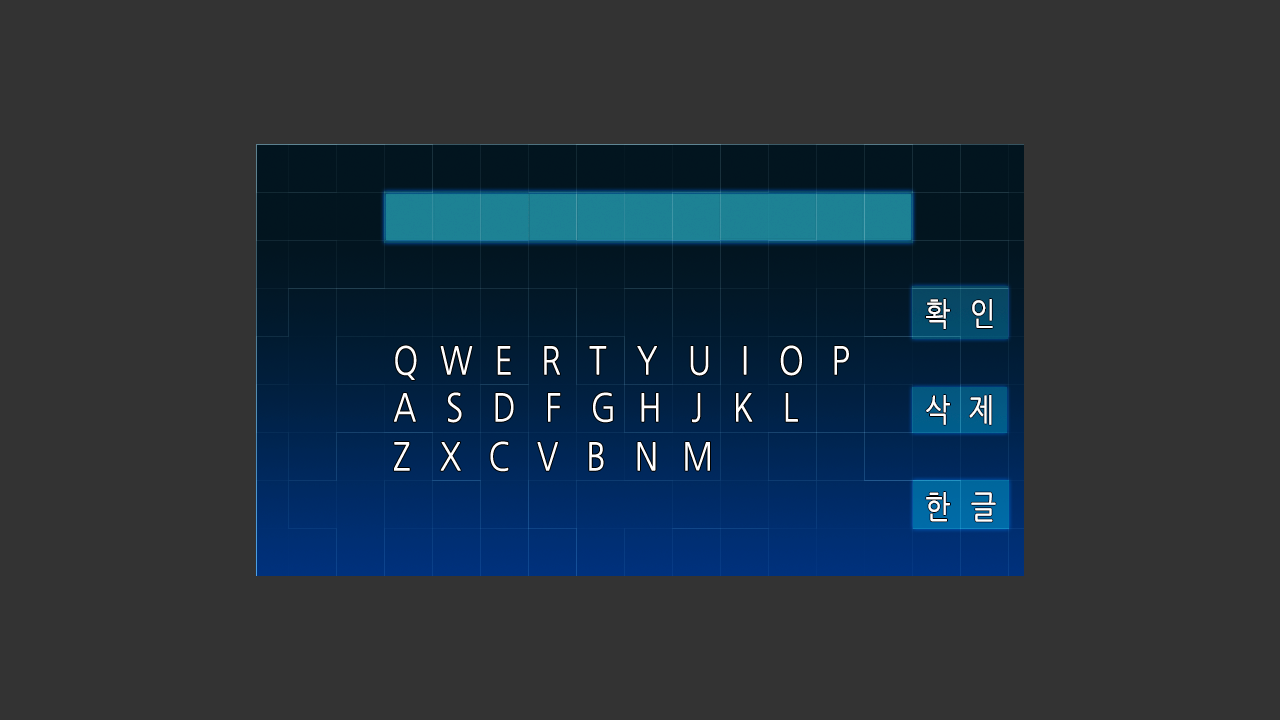
<style>
.page{position:relative;width:1280px;height:720px;background:#333333}
.page>*{position:absolute;margin:0}
.t1{font:32px "NanumGothic";letter-spacing:0.715em;color:#fffefe;font-weight:bold;scale:0.83 1}
.t2{font:38.4px "NanumGothic";letter-spacing:0.91em;color:#fffefe;font-weight:bold;scale:0.83 1}
.t3{font:38.4px "NanumGothic";letter-spacing:0.65em;color:#fffefe;font-weight:bold;scale:0.83 1}
.t4{font:38.4px "NanumGothic";letter-spacing:0.85em;color:#fffefe;font-weight:bold;scale:0.83 1}
.t5{font:38.4px "NanumGothic";letter-spacing:0.83em;color:#fffefe;font-weight:bold;scale:0.83 1}
.t6{font:38.4px "NanumGothic";letter-spacing:0.89em;color:#fffefe;font-weight:bold;scale:0.83 1}
.t7{font:38.4px "NanumGothic";letter-spacing:0.67em;color:#fffefe;font-weight:bold;scale:0.83 1}
.t8{font:38.4px "NanumGothic";letter-spacing:0.9em;color:#fffefe;font-weight:bold;scale:0.83 1}
.t9{font:38.4px "NanumGothic";letter-spacing:0.82em;color:#fffefe;font-weight:bold;scale:0.83 1}
.t10{font:38.4px "NanumGothic";letter-spacing:0.88em;color:#fffefe;font-weight:bold;scale:0.83 1}
.t11{font:38.4px "NanumGothic";letter-spacing:0.73em;color:#fffefe;font-weight:bold;scale:0.83 1}
</style>
<div class="page">
<p class="t1" style="left:926px;top:299px;width:67px;height:30px">확인</p>
<p class="t2" style="left:395px;top:345px;width:454px;height:35px"><span class="t3">QW</span><span class="t4">ER</span>TYUI<span class="t5">OP</span></p>
<p class="t6" style="left:394px;top:392px;width:404px;height:31px">ASDF<span class="t7">G</span><span class="t8">HJKL</span></p>
<p class="t1" style="left:926px;top:395px;width:66px;height:30px">삭제</p>
<p class="t9" style="left:394px;top:441px;width:316px;height:31px"><span class="t6">Z</span>XC<span class="t4">V</span><span class="t10">B</span><span class="t11">NM</span></p>
<p class="t1" style="left:926px;top:492px;width:70px;height:30px">한글</p>
</div>
